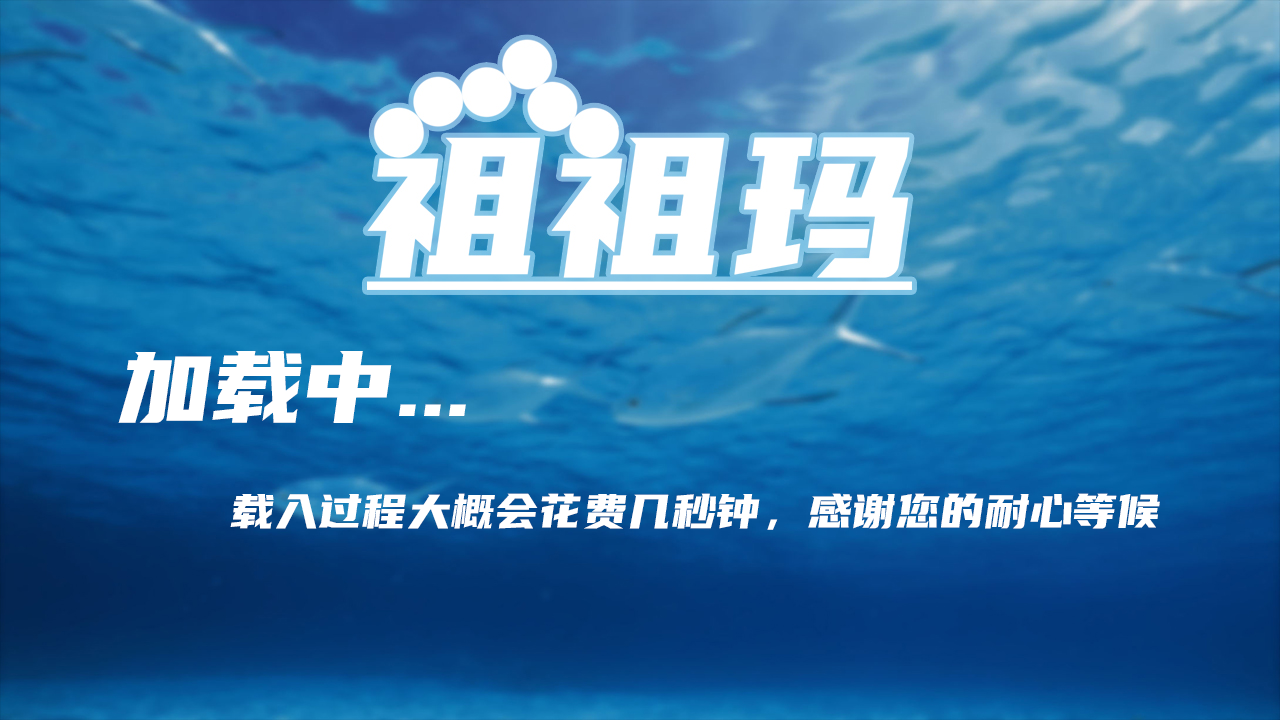
<style>
.page{position:relative;width:1280px;height:720px}
.page>*{position:absolute;margin:0}
.t1{font:100px "YouSheBiaoTiHei";color:#ffffff}
.t2{font:48px "YouSheBiaoTiHei";color:#ffffff}
</style>
<div class="page">
<p class="t1" style="left:118px;top:351px;width:348px;height:72px">加载中...</p>
<p class="t2" style="left:230px;top:493px;width:930px;height:37px">载入过程大概会花费几秒钟，感谢您的耐心等候</p>
</div>
